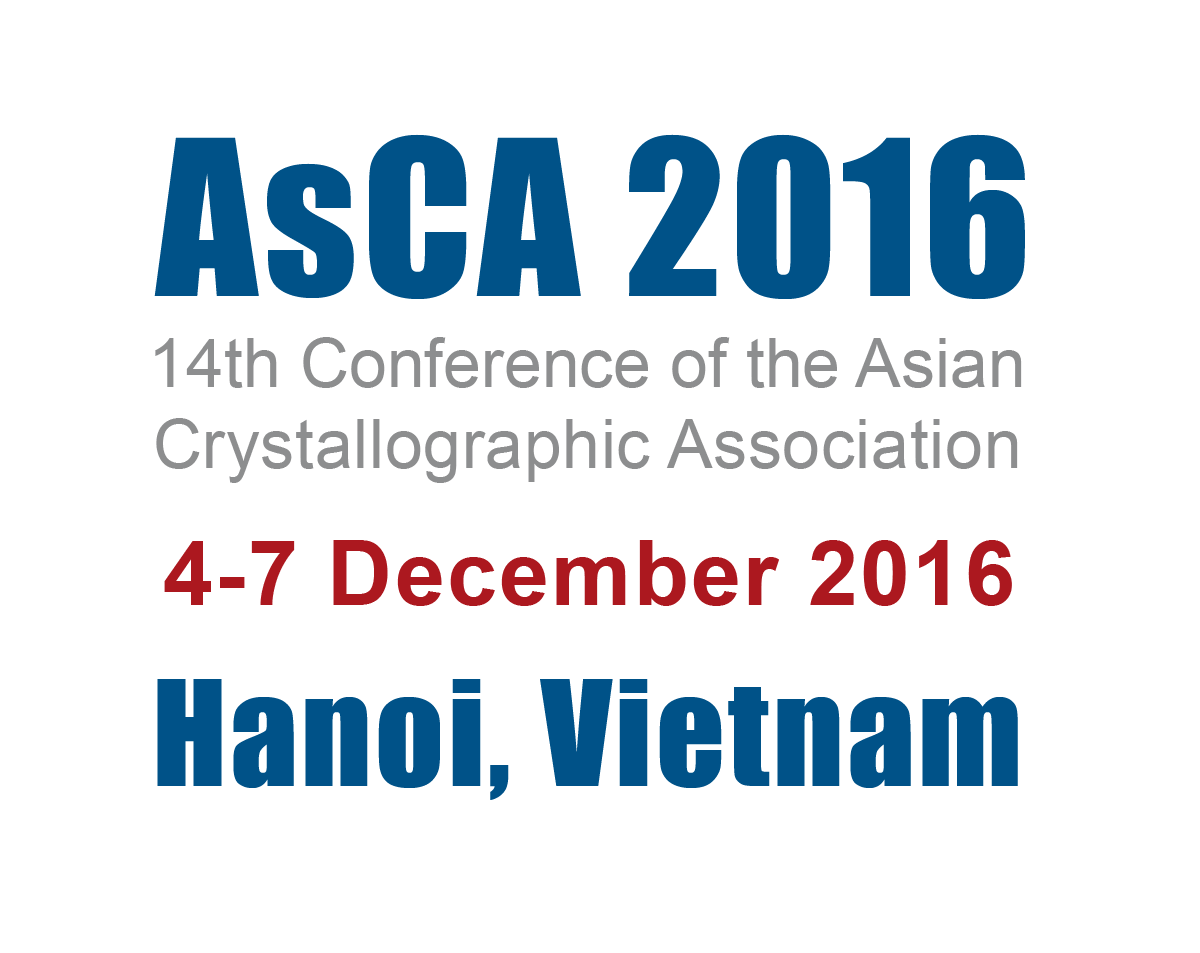
<style>
.page{position:relative;width:1200px;height:953px;background:#ffffff}
.page>*{position:absolute;margin:0}
.t1{font:200px "Impact";letter-spacing:0.025em;color:#005288}
.t2{font:68px "ArialMT";color:#8d8e8f}
.t3{font:68px "ArialMT";letter-spacing:0.01em;color:#8d8e8f}
.t4{font:90px "Arial-BoldMT";letter-spacing:0.025em;color:#ac181f}
.t5{font:135px "Impact";letter-spacing:0.025em;color:#005288}
</style>
<div class="page">
<p class="t1" style="left:154px;top:134px;width:871px;height:165px">AsCA 2016</p>
<p class="t2" style="left:155px;top:337px;width:867px;height:146px;text-align:center">14th Conference of the Asian<br><span class="t3">Crystallographic Association</span></p>
<p class="t4" style="left:164px;top:540px;width:848px;height:66px">4-7 December 2016</p>
<p class="t5" style="left:157px;top:679px;width:861px;height:121px">Hanoi, Vietnam</p>
</div>
